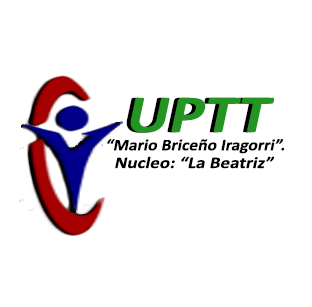
<style>
.page{position:relative;width:312px;height:307px;background:#ffffff}
.page>*{position:absolute;margin:0}
.t1{font:54.1px "Calibri-Bold";font-style:italic;scale:1.21 1}
.t2{font:54.1px "Calibri-Bold";color:#249423;font-style:italic;scale:1.21 1}
.t3{font:16.3px "Calibri-Bold";color:#000000;font-style:italic;scale:1.08 1}
.t4{font:16.3px "Calibri-Bold";color:#000000;font-style:italic;scale:1.17 1}
</style>
<div class="page">
<p class="t1" style="left:126px;top:97px;width:144px;height:36px">UPTT</p>
<p class="t2" style="left:130px;top:97px;width:144px;height:36px">UPTT</p>
<p class="t3" style="left:107px;top:139px;width:178px;height:15px">“Mario Briceño Iragorri”.</p>
<p class="t4" style="left:115px;top:156px;width:159px;height:13px">Nucleo: “La Beatriz”</p>
</div>
